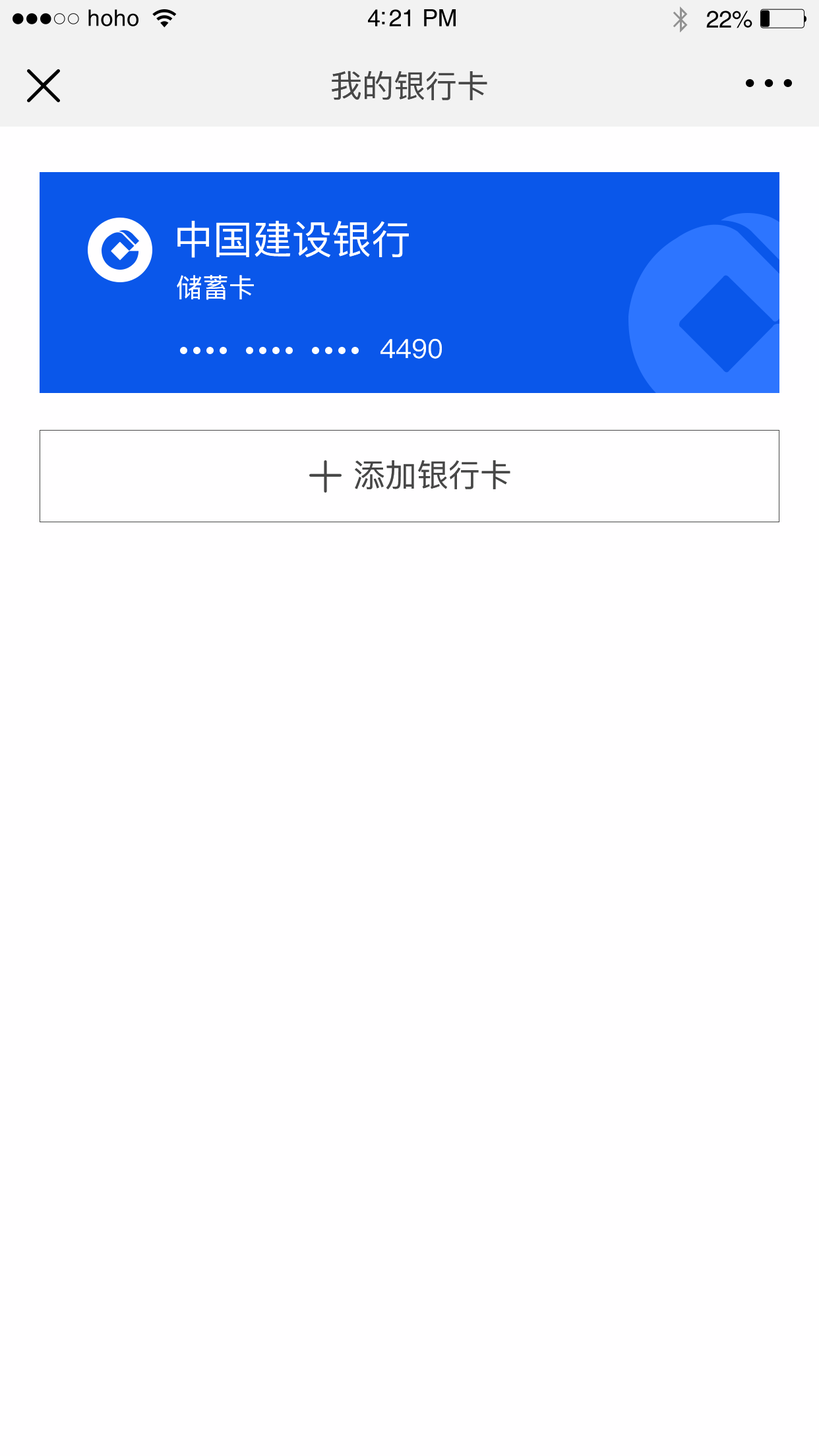
<style>
.page{position:relative;width:819px;height:1456px;background:#fffeff}
.page>*{position:absolute;margin:0}
.t1{font:22.8px "Helvetica";letter-spacing:0.02em;color:#000000}
.t2{font:23.8px "Helvetica";letter-spacing:-0.02em;color:#000000}
.t3{font:31.7px "PingFang-SC-Medium";color:#474747}
.t4{font:39.6px "PingFang-SC-Medium";color:#fffeff}
.t5{font:26.4px "PingFang-SC-Medium";color:#fffeff}
</style>
<div class="page">
<p class="t1" style="left:88px;top:9px;width:50px;height:17px">hoho</p>
<p class="t2" style="left:368px;top:9px;width:88px;height:17px">4:21 PM</p>
<p class="t2" style="left:706px;top:11px;width:46px;height:17px">22%</p>
<p class="t3" style="left:332px;top:71px;width:155px;height:29px">我的银行卡</p>
<p class="t4" style="left:177px;top:220px;width:232px;height:38px">中国建设银行</p>
<p class="t5" style="left:177px;top:275px;width:77px;height:25px">储蓄卡</p>
<p class="t5" style="left:380px;top:338px;width:62px;height:21px">4490</p>
<p class="t3" style="left:355px;top:460px;width:155px;height:29px">添加银行卡</p>
</div>
